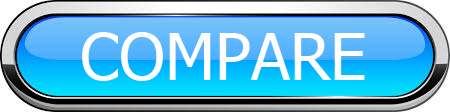
<style>
.page{position:relative;width:450px;height:112px}
.page>*{position:absolute;margin:0}
.t1{font:65px "Tahoma";color:#ffffff}
</style>
<div class="page">
<p class="t1" style="left:82px;top:32px;width:283px;height:49px">COMPARE</p>
</div>
